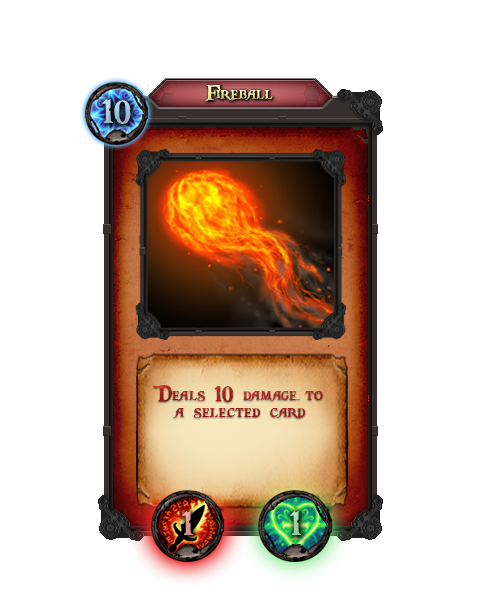
<style>
.page{position:relative;width:500px;height:600px;background:#ffffff}
.page>*{position:absolute;margin:0}
.t1{font:24px "PiecesofEight"}
.t2{font:36px "PiecesofEight";color:#a4c4da}
.t3{font:24px "PiecesofEight";color:#a11d1d}
.t4{font:36px "PiecesofEight";color:#efa4a4}
.t5{font:36px "PiecesofEight";color:#a8eab9}
</style>
<div class="page">
<p class="t1" style="left:205px;top:85px;width:68px;height:16px">Fireball</p>
<p class="t2" style="left:102px;top:99px;width:29px;height:25px">10</p>
<p class="t3" style="left:153px;top:384px;width:170px;height:35px">Deals 10 damage to a selected card</p>
<p class="t4" style="left:182px;top:511px;width:11px;height:24px">1</p>
<p class="t5" style="left:290px;top:511px;width:11px;height:24px">1</p>
</div>
